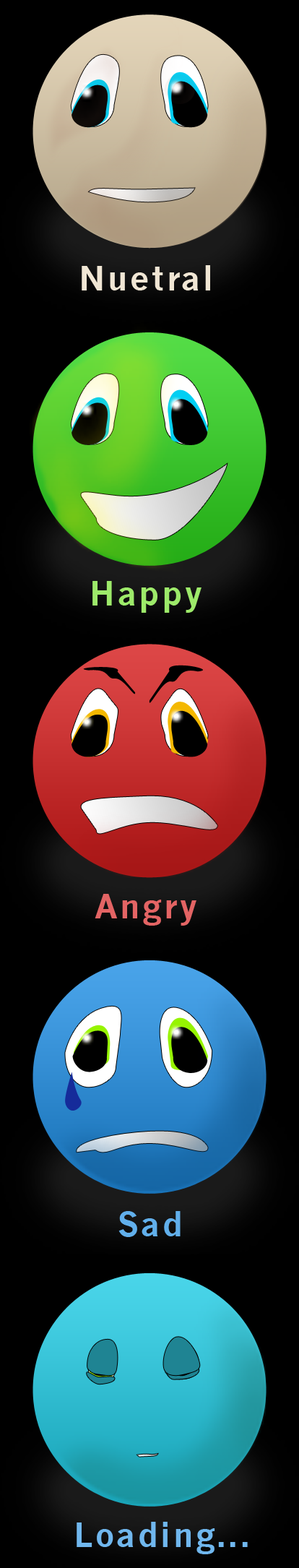
<style>
.page{position:relative;width:299px;height:1568px;background:#000000}
.page>*{position:absolute;margin:0}
.t1{font:33.2px "NewsGothic-Bold";letter-spacing:0.075em;color:#f0e6d4}
.t2{font:33.2px "NewsGothic-Bold";letter-spacing:0.075em;color:#9dea6a}
.t3{font:33.2px "NewsGothic-Bold";letter-spacing:0.075em;color:#e36464}
.t4{font:33.2px "NewsGothic-Bold";letter-spacing:0.075em;color:#61afeb}
.t5{font:33.2px "NewsGothic-Bold";letter-spacing:0.075em;color:#70b7ee}
</style>
<div class="page">
<p class="t1" style="left:82px;top:265px;width:128px;height:25px">Nuetral</p>
<p class="t2" style="left:92px;top:581px;width:110px;height:32px">Happy</p>
<p class="t3" style="left:95px;top:894px;width:102px;height:32px">Angry</p>
<p class="t4" style="left:119px;top:1211px;width:62px;height:26px">Sad</p>
<p class="t5" style="left:77px;top:1522px;width:171px;height:32px">Loading...</p>
</div>
